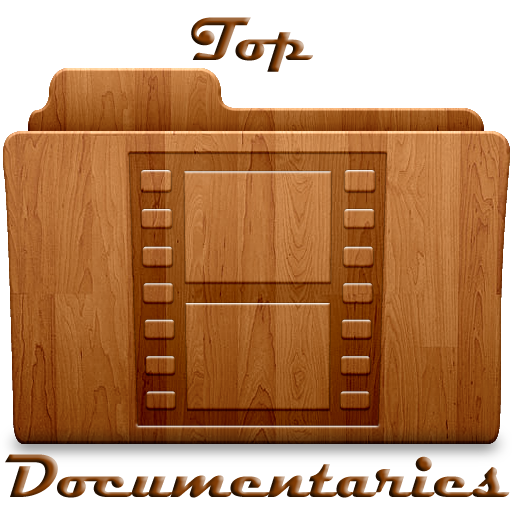
<style>
.page{position:relative;width:512px;height:512px;background:#ffffff}
.page>*{position:absolute;margin:0}
.t1{font:62px "Magneto-Bold"}
</style>
<div class="page">
<p class="t1" style="left:191px;top:17px;width:122px;height:55px">Top</p>
<p class="t1" style="left:5px;top:454px;width:505px;height:44px">Documentaries</p>
</div>
